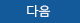
<style>
.page{position:relative;width:80px;height:23px;background:#125a9a}
.page>*{position:absolute;margin:0}
.t1{font:12.5px "MalgunGothic";color:#ffffff}
</style>
<div class="page">
<p class="t1" style="left:27px;top:5px;width:24px;height:12px">다음</p>
</div>
